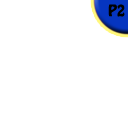
<style>
.page{position:relative;width:128px;height:128px;background:#ffffff}
.page>*{position:absolute;margin:0}
.t1{font:14px "HoboStd";color:#000000}
</style>
<div class="page">
<p class="t1" style="left:108px;top:4px;width:17px;height:13px">P2</p>
</div>
